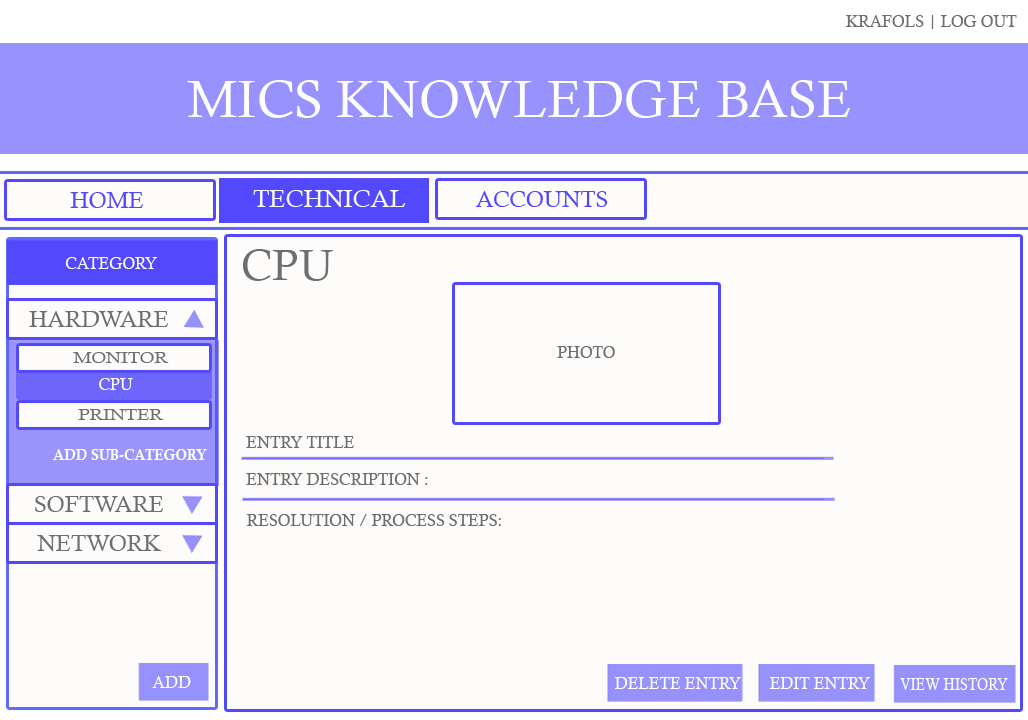
<style>
.page{position:relative;width:1028px;height:720px;background:#fdfcfa}
.page>*{position:absolute;margin:0}
.t1{font:16px "CalistoMT";color:#6e6e6f}
.t2{font:52.3px "CalistoMT";color:#fefeff}
.t3{font:22.8px "CalistoMT";color:#5249fc}
.t4{font:24.8px "CalistoMT";color:#fdfcf9}
.t5{font:16px "CalistoMT";color:#fdfcf9}
.t6{font:43.4px "CalistoMT";color:#6e6e6f}
.t7{font:22.8px "CalistoMT";color:#6e6e6f}
.t8{font:15.2px "CalistoMT";color:#6e6e6f;scale:1.22 1}
.t9{font:14.8px "CalisMTBol";color:#fdfcf9;scale:0.95 1}
.t10{font:16px "CalistoMT";color:#fdfcf9;scale:0.89 1}
</style>
<div class="page">
<p class="t1" style="left:846px;top:15px;width:171px;height:14px">KRAFOLS | LOG OUT</p>
<p class="t2" style="left:187px;top:80px;width:663px;height:38px">MICS KNOWLEDGE BASE</p>
<p class="t3" style="left:70px;top:192px;width:73px;height:16px">HOME</p>
<p class="t4" style="left:253px;top:190px;width:153px;height:18px">TECHNICAL</p>
<p class="t3" style="left:475px;top:191px;width:133px;height:17px">ACCOUNTS</p>
<p class="t5" style="left:65px;top:257px;width:92px;height:12px">CATEGORY</p>
<p class="t6" style="left:243px;top:249px;width:90px;height:32px">CPU</p>
<p class="t7" style="left:29px;top:311px;width:140px;height:16px">HARDWARE</p>
<p class="t8" style="left:73px;top:352px;width:96px;height:11px">MONITOR</p>
<p class="t1" style="left:557px;top:346px;width:58px;height:12px">PHOTO</p>
<p class="t5" style="left:99px;top:378px;width:34px;height:12px">CPU</p>
<p class="t8" style="left:78px;top:409px;width:86px;height:11px">PRINTER</p>
<p class="t1" style="left:246px;top:436px;width:108px;height:12px">ENTRY TITLE</p>
<p class="t9" style="left:53px;top:449px;width:154px;height:11px">ADD SUB-CATEGORY</p>
<p class="t1" style="left:246px;top:473px;width:182px;height:12px">ENTRY DESCRIPTION :</p>
<p class="t7" style="left:35px;top:496px;width:129px;height:16px">SOFTWARE</p>
<p class="t1" style="left:246px;top:514px;width:255px;height:12px">RESOLUTION / PROCESS STEPS:</p>
<p class="t7" style="left:37px;top:535px;width:125px;height:17px">NETWORK</p>
<p class="t5" style="left:152px;top:676px;width:39px;height:12px">ADD</p>
<p class="t5" style="left:615px;top:677px;width:126px;height:12px">DELETE ENTRY</p>
<p class="t5" style="left:769px;top:677px;width:101px;height:12px">EDIT ENTRY</p>
<p class="t10" style="left:900px;top:678px;width:108px;height:12px">VIEW HISTORY</p>
</div>
